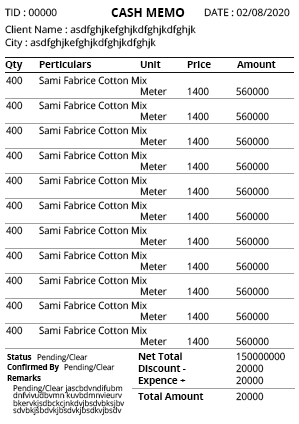
<style>
.page{position:relative;width:299px;height:424px;background:#ffffff}
.page>*{position:absolute;margin:0}
.t1{font:10px "OpenSans";color:#000000}
.t2{font:12px "OpenSans-Bold";color:#000000}
.t3{font:10px "OpenSans-Bold";color:#000000;scale:0.96 1}
.t4{font:10px "OpenSans";scale:0.96 1}
.t5{font:10px "OpenSans";color:#000000;scale:0.96 1}
.t6{font:8px "OpenSans";scale:0.96 1}
.t7{font:8px "OpenSans-Bold";color:#000000;scale:0.96 1}
.t8{font:8px/7.5px "OpenSans";color:#0b0b0b;scale:0.96 1}
</style>
<div class="page">
<p class="t1" style="left:4px;top:8px;width:53px;height:9px">TID : 00000</p>
<p class="t2" style="left:111px;top:8px;width:74px;height:9px">CASH MEMO</p>
<p class="t1" style="left:204px;top:8px;width:86px;height:9px">DATE : 02/08/2020</p>
<p class="t1" style="left:5px;top:25px;width:191px;height:11px">Client Name : asdfghjkefghjkdfghjkdfghjk</p>
<p class="t1" style="left:5px;top:38px;width:151px;height:11px">City : asdfghjkefghjkdfghjkdfghjk</p>
<p class="t3" style="left:5px;top:61px;width:18px;height:10px">Qty</p>
<p class="t3" style="left:39px;top:60px;width:53px;height:8px">Perticulars</p>
<p class="t3" style="left:140px;top:61px;width:21px;height:7px">Unit</p>
<p class="t3" style="left:187px;top:61px;width:24px;height:7px">Price</p>
<p class="t3" style="left:237px;top:61px;width:39px;height:7px">Amount</p>
<p class="t4" style="left:6px;top:76px;width:17px;height:9px">400</p>
<p class="t5" style="left:39px;top:76px;width:108px;height:9px">Sami Fabrice Cotton Mix</p>
<p class="t4" style="left:140px;top:87px;width:27px;height:9px">Meter</p>
<p class="t4" style="left:187px;top:87px;width:22px;height:9px">1400</p>
<p class="t4" style="left:236px;top:87px;width:33px;height:9px">560000</p>
<p class="t4" style="left:6px;top:101px;width:17px;height:9px">400</p>
<p class="t5" style="left:39px;top:101px;width:108px;height:9px">Sami Fabrice Cotton Mix</p>
<p class="t4" style="left:140px;top:112px;width:27px;height:9px">Meter</p>
<p class="t4" style="left:187px;top:112px;width:22px;height:9px">1400</p>
<p class="t4" style="left:236px;top:112px;width:33px;height:9px">560000</p>
<p class="t4" style="left:6px;top:126px;width:17px;height:9px">400</p>
<p class="t5" style="left:39px;top:126px;width:108px;height:9px">Sami Fabrice Cotton Mix</p>
<p class="t4" style="left:140px;top:137px;width:27px;height:9px">Meter</p>
<p class="t4" style="left:187px;top:137px;width:22px;height:9px">1400</p>
<p class="t4" style="left:236px;top:137px;width:33px;height:9px">560000</p>
<p class="t4" style="left:6px;top:151px;width:17px;height:9px">400</p>
<p class="t5" style="left:39px;top:151px;width:108px;height:9px">Sami Fabrice Cotton Mix</p>
<p class="t4" style="left:140px;top:162px;width:27px;height:9px">Meter</p>
<p class="t4" style="left:187px;top:162px;width:22px;height:9px">1400</p>
<p class="t4" style="left:236px;top:162px;width:33px;height:9px">560000</p>
<p class="t4" style="left:6px;top:176px;width:17px;height:9px">400</p>
<p class="t5" style="left:39px;top:176px;width:108px;height:9px">Sami Fabrice Cotton Mix</p>
<p class="t4" style="left:140px;top:187px;width:27px;height:9px">Meter</p>
<p class="t4" style="left:187px;top:187px;width:22px;height:9px">1400</p>
<p class="t4" style="left:236px;top:187px;width:33px;height:9px">560000</p>
<p class="t4" style="left:6px;top:201px;width:17px;height:9px">400</p>
<p class="t5" style="left:39px;top:201px;width:108px;height:9px">Sami Fabrice Cotton Mix</p>
<p class="t4" style="left:140px;top:212px;width:27px;height:9px">Meter</p>
<p class="t4" style="left:187px;top:212px;width:22px;height:9px">1400</p>
<p class="t4" style="left:236px;top:212px;width:33px;height:9px">560000</p>
<p class="t4" style="left:6px;top:226px;width:17px;height:9px">400</p>
<p class="t5" style="left:39px;top:226px;width:108px;height:9px">Sami Fabrice Cotton Mix</p>
<p class="t4" style="left:140px;top:237px;width:27px;height:9px">Meter</p>
<p class="t4" style="left:187px;top:237px;width:22px;height:9px">1400</p>
<p class="t4" style="left:236px;top:237px;width:33px;height:9px">560000</p>
<p class="t4" style="left:6px;top:251px;width:17px;height:9px">400</p>
<p class="t5" style="left:39px;top:251px;width:108px;height:9px">Sami Fabrice Cotton Mix</p>
<p class="t4" style="left:140px;top:262px;width:27px;height:9px">Meter</p>
<p class="t4" style="left:187px;top:262px;width:22px;height:9px">1400</p>
<p class="t4" style="left:236px;top:262px;width:33px;height:9px">560000</p>
<p class="t4" style="left:6px;top:276px;width:17px;height:9px">400</p>
<p class="t5" style="left:39px;top:276px;width:108px;height:9px">Sami Fabrice Cotton Mix</p>
<p class="t4" style="left:140px;top:287px;width:27px;height:9px">Meter</p>
<p class="t4" style="left:187px;top:287px;width:22px;height:9px">1400</p>
<p class="t4" style="left:236px;top:287px;width:33px;height:9px">560000</p>
<p class="t4" style="left:6px;top:301px;width:17px;height:9px">400</p>
<p class="t5" style="left:39px;top:301px;width:108px;height:9px">Sami Fabrice Cotton Mix</p>
<p class="t4" style="left:140px;top:312px;width:27px;height:9px">Meter</p>
<p class="t4" style="left:187px;top:312px;width:22px;height:9px">1400</p>
<p class="t4" style="left:236px;top:312px;width:33px;height:9px">560000</p>
<p class="t4" style="left:6px;top:326px;width:17px;height:9px">400</p>
<p class="t5" style="left:39px;top:326px;width:108px;height:9px">Sami Fabrice Cotton Mix</p>
<p class="t4" style="left:140px;top:337px;width:27px;height:9px">Meter</p>
<p class="t4" style="left:187px;top:337px;width:22px;height:9px">1400</p>
<p class="t4" style="left:236px;top:337px;width:33px;height:9px">560000</p>
<p class="t6" style="left:37px;top:353px;width:51px;height:10px">Pending/Clear</p>
<p class="t3" style="left:138px;top:352px;width:44px;height:8px">Net Total</p>
<p class="t4" style="left:236px;top:352px;width:49px;height:9px">150000000</p>
<p class="t7" style="left:7px;top:354px;width:25px;height:6px">Status</p>
<p class="t7" style="left:7px;top:364px;width:53px;height:8px">Confirmed By</p>
<p class="t6" style="left:64px;top:363px;width:51px;height:10px">Pending/Clear</p>
<p class="t3" style="left:138px;top:365px;width:48px;height:7px">Discount -</p>
<p class="t4" style="left:236px;top:364px;width:28px;height:9px">20000</p>
<p class="t7" style="left:7px;top:374px;width:34px;height:7px">Remarks</p>
<p class="t3" style="left:138px;top:377px;width:48px;height:9px">Expence +</p>
<p class="t4" style="left:236px;top:376px;width:28px;height:9px">20000</p>
<p class="t8" style="left:13px;top:384px;width:112px;height:32px">Pending/Clear jascbdvndifubm<br>dnfvivudbvmn kuvbdmnvieurv<br>bkervkjsdbckcjnkdvjbsdvbksjbv<br>sdvbkjsbdvkjbsdvkjbsdkvjbsdv</p>
<p class="t3" style="left:138px;top:392px;width:66px;height:8px">Total Amount</p>
<p class="t4" style="left:236px;top:392px;width:28px;height:9px">20000</p>
</div>
